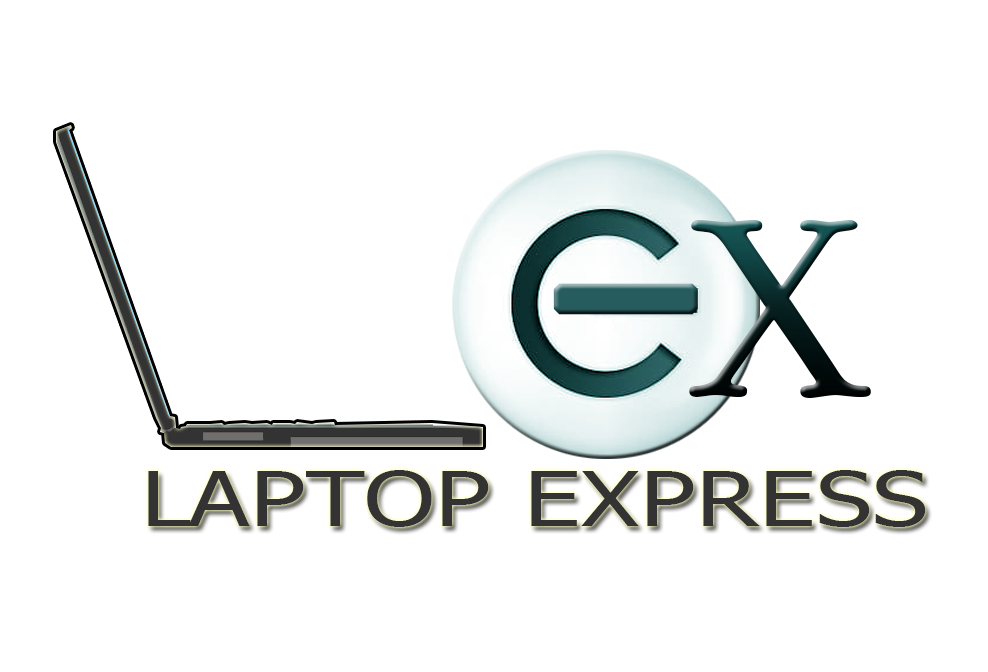
<style>
.page{position:relative;width:988px;height:672px;background:#ffffff}
.page>*{position:absolute;margin:0}
.t1{font:250px "PoorRichard-Regular";letter-spacing:0.01em;scale:1.11 1}
.t2{font:312.5px "SegoeUIHistoric";letter-spacing:0.01em;color:#275c5e;font-weight:bold;scale:1.6 1}
.t3{font:75px "Tahoma";letter-spacing:0.01em;color:#333333;scale:1.33 1}
</style>
<div class="page">
<p class="t1" style="left:689px;top:219px;width:182px;height:179px">X</p>
<p class="t2" style="left:553px;top:283px;width:145px;height:32px">-</p>
<p class="t3" style="left:148px;top:470px;width:778px;height:57px">LAPTOP EXPRESS</p>
</div>
